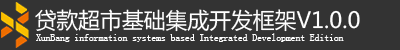
<style>
.page{position:relative;width:400px;height:50px;background:#333333}
.page>*{position:absolute;margin:0}
.t1{font:22px "MicrosoftYaHei";color:#ffffff}
.t2{font:9.7px "SimSun";color:#ffffff}
</style>
<div class="page">
<p class="t1" style="left:35px;top:9px;width:325px;height:23px">贷款超市基础集成开发框架V1.0.0</p>
<p class="t2" style="left:36px;top:33px;width:308px;height:9px">XunBang information systems based Integrated Development Edition</p>
</div>
